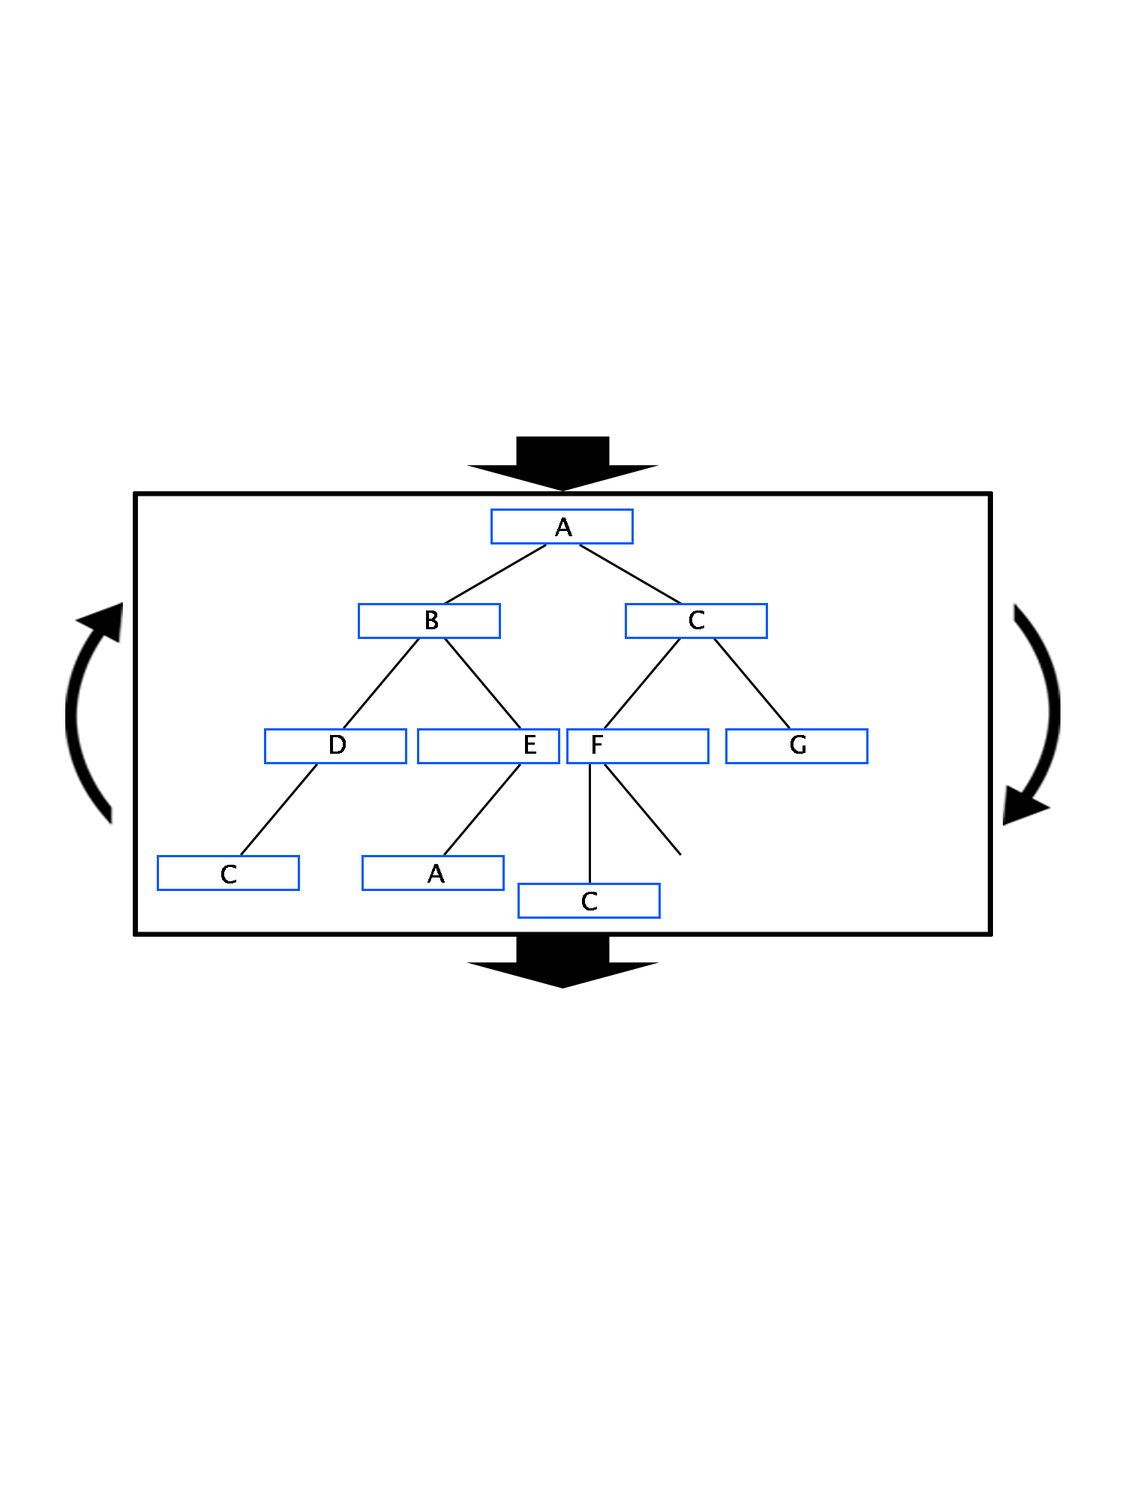
<style>
.page{position:relative;width:1125px;height:1500px;background:#ffffff}
.page>*{position:absolute;margin:0}
.t1{font:9px "LucidaSansUnicode";color:#000000;font-weight:bold}
</style>
<div class="page">
<p class="t1" style="left:555px;top:518px;width:17px;height:18px;text-align:center">A</p>
<p class="t1" style="left:426px;top:610px;width:12px;height:19px;text-align:center">B</p>
<p class="t1" style="left:689px;top:610px;width:15px;height:19px;text-align:center">C</p>
<p class="t1" style="left:330px;top:735px;width:16px;height:19px;text-align:center">D</p>
<p class="t1" style="left:525px;top:735px;width:11px;height:19px;text-align:center">E</p>
<p class="t1" style="left:592px;top:735px;width:11px;height:19px;text-align:center">F</p>
<p class="t1" style="left:790px;top:735px;width:16px;height:19px;text-align:center">G</p>
<p class="t1" style="left:221px;top:865px;width:15px;height:19px;text-align:center">C</p>
<p class="t1" style="left:428px;top:864px;width:17px;height:19px;text-align:center">A</p>
<p class="t1" style="left:582px;top:892px;width:15px;height:18px;text-align:center">C</p>
</div>
